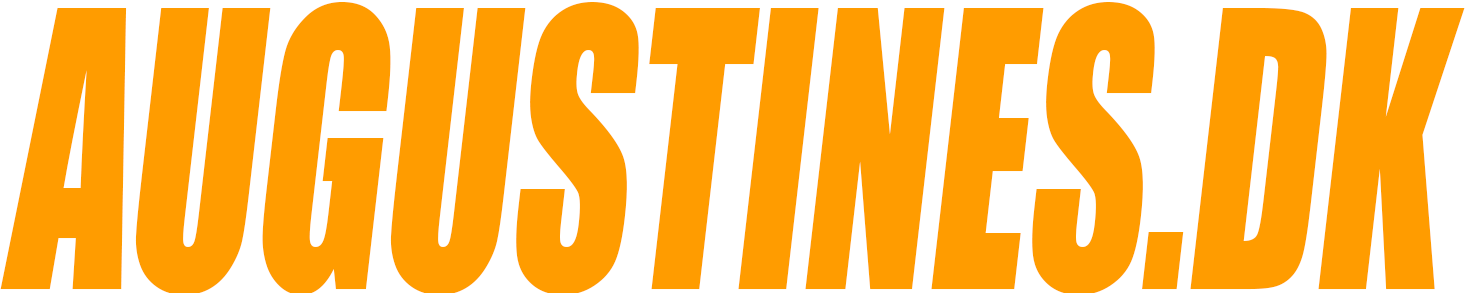
<style>
.page{position:relative;width:1465px;height:293px;background:#ff9c00}
.page>*{position:absolute;margin:0}
.t1{font:355.1px "Impact";color:#ff9c00;font-style:italic;scale:0.65 1}
</style>
<div class="page">
<p class="t1" style="left:0px;top:2px;width:1465px;height:293px">AUGUSTINES.DK</p>
</div>
